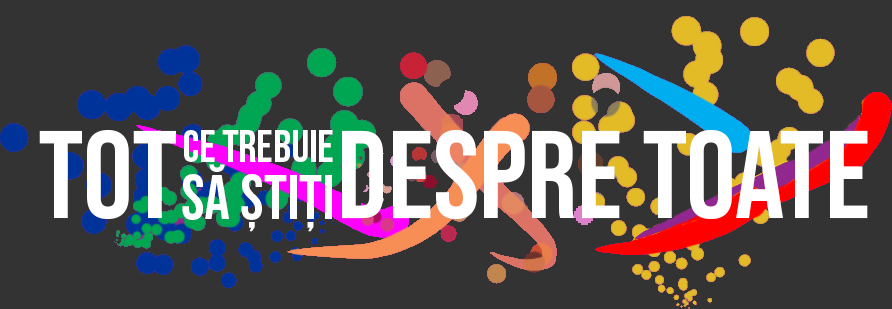
<style>
.page{position:relative;width:892px;height:309px;background:#333333}
.page>*{position:absolute;margin:0}
.t1{font:124.1px "BebasNeue-Regular";color:#ffffff}
.t2{font:45.3px "BebasNeue-Regular";letter-spacing:-0.004em;color:#ffffff}
.t3{font:63.5px "BebasNeue-Regular";color:#ffffff}
</style>
<div class="page">
<p class="t1" style="left:39px;top:129px;width:137px;height:91px">TOT</p>
<p class="t2" style="left:184px;top:130px;width:149px;height:32px">CE TREBUIE</p>
<p class="t1" style="left:342px;top:129px;width:526px;height:91px">DESPRE TOATE</p>
<p class="t3" style="left:182px;top:164px;width:150px;height:68px">SĂ ȘTIȚI</p>
</div>
